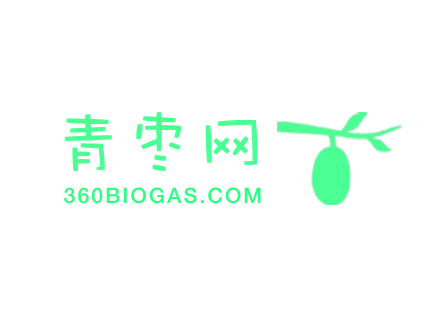
<style>
.page{position:relative;width:431px;height:317px;background:#ffffff}
.page>*{position:absolute;margin:0}
.t1{font:71.2px "DFWaWaSC-W5";color:#4aff93}
.t2{font:21.2px "HelveticaNeue-Medium";letter-spacing:0.1em;color:#2eff82}
</style>
<div class="page">
<p class="t1" style="left:64px;top:112px;width:194px;height:59px">青枣网</p>
<p class="t2" style="left:64px;top:187px;width:197px;height:17px">360BIOGAS.COM</p>
</div>
